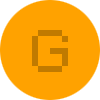
<style>
.page{position:relative;width:100px;height:100px;background:#ffa200}
.page>*{position:absolute;margin:0}
.t1{font:48px "PixelFJ8pt1Normal";color:#c07a00}
</style>
<div class="page">
<p class="t1" style="left:32px;top:30px;width:36px;height:42px">G</p>
</div>
